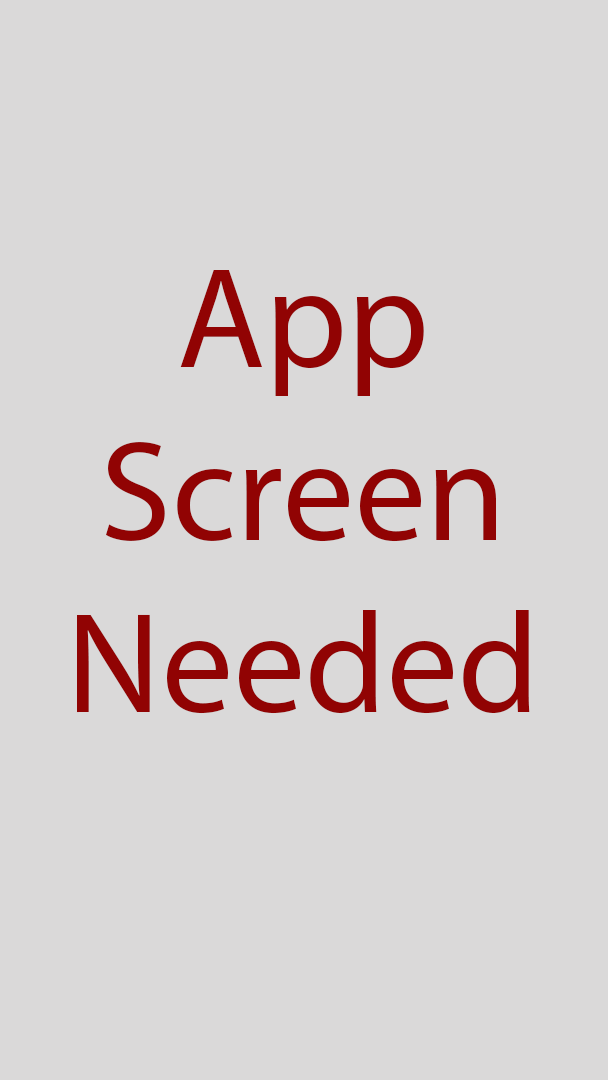
<style>
.page{position:relative;width:608px;height:1080px;background:#dad9d9}
.page>*{position:absolute;margin:0}
.t1{font:144px "MyriadPro-Regular";color:#910303}
</style>
<div class="page">
<p class="t1" style="left:77px;top:270px;width:453px;height:444px;text-align:center">App<br>Screen<br>Needed</p>
</div>
